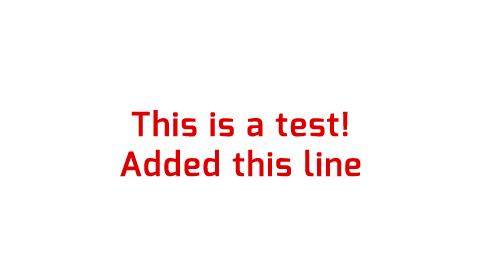
<style>
.page{position:relative;width:480px;height:272px;background:#ffffff}
.page>*{position:absolute;margin:0}
.t1{font:33.2px "Exo-DemiBold";letter-spacing:0.05em;color:#dd0000}
</style>
<div class="page">
<p class="t1" style="left:120px;top:110px;width:241px;height:67px;text-align:center">This is a test!<br>Added this line</p>
</div>
